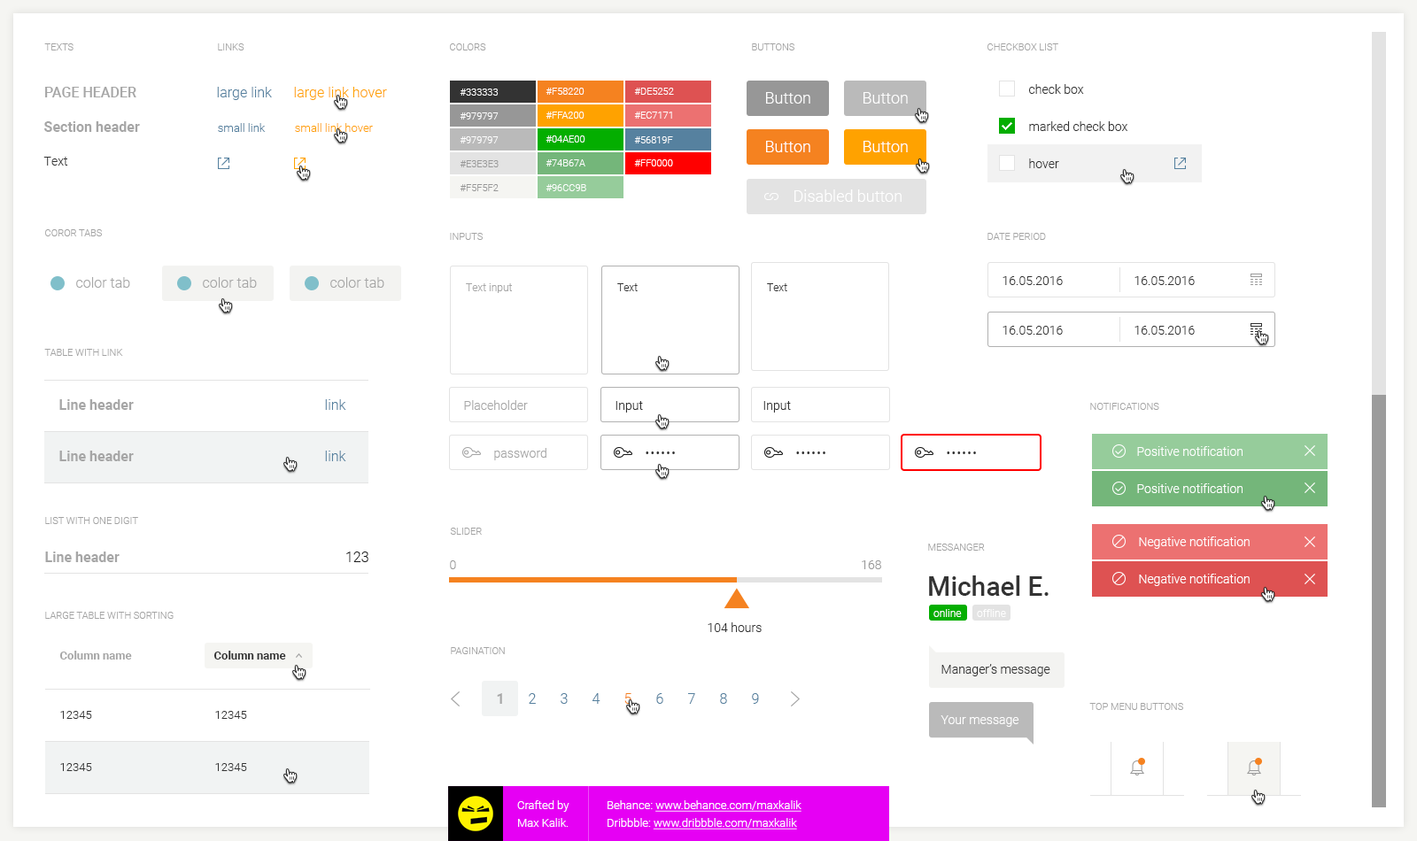
<style>
.page{position:relative;width:1417px;height:841px;background:#ffffff}
.page>*{position:absolute;margin:0}
.t1{font:9.7px "Roboto-Light";color:#a3a3a3;text-transform:uppercase}
.t2{font:14.2px "Roboto-Medium";color:#a6a6a6;text-transform:uppercase}
.t3{font:14.2px "Roboto-Light";color:#56819f}
.t4{font:14.2px "Roboto-Light";color:#ffa200}
.t5{font:9.7px "Roboto-Light";color:#ffffff;text-transform:uppercase}
.t6{font:12.4px/37.2px "Roboto-Light";color:#333333}
.t7{font:15.9px "Roboto-Light";color:#ffffff}
.t8{font:14.2px "Roboto-Bold";color:#a6a6a6}
.t9{font:11.5px "Roboto-Light";color:#56819f}
.t10{font:11.5px "Roboto-Light";color:#ffa200}
.t11{font:12.4px "Roboto-Light";color:#333333}
.t12{font:9.7px "Roboto-Light";color:#979797;text-transform:uppercase}
.t13{font:14.2px "Roboto-Light";color:#a6a6a6}
.t14{font:10.6px "Roboto-Light";color:#a6a6a6}
.t15{font:10.6px "Roboto-Light";color:#333333}
.t16{font:12.4px "Roboto-Light";color:#a6a6a6}
.t17{font:12.4px "Roboto-Light";color:#ffffff}
.t18{font:12.4px "Roboto-Light";letter-spacing:0.1em;color:#333333}
.t19{font:14.2px "Roboto-Light";color:#191919}
.t20{font:12.4px "Roboto-Light";color:#999999}
.t21{font:26.6px "Roboto-Medium";color:#333333}
.t22{font:10.6px "Roboto-Light";color:#ffffff}
.t23{font:11.5px "Roboto-Bold";color:#a6a6a6}
.t24{font:11.5px "Roboto-Bold";color:#333333}
.t25{font:14.2px "Roboto-Light";color:#f58220}
.t26{font:11.5px "Roboto-Light";color:#333333}
.t27{font:11.5px/17.7px "Roboto-Light";color:#ffffff}
.t28{font:11.5px/17.7px "Roboto-Light";color:#ffffff;text-decoration:underline}
</style>
<div class="page">
<p class="t1" style="left:44px;top:43px;width:30px;height:7px">Texts</p>
<p class="t1" style="left:218px;top:43px;width:26px;height:7px">Links</p>
<p class="t1" style="left:450px;top:43px;width:36px;height:7px">Colors</p>
<p class="t1" style="left:752px;top:43px;width:42px;height:7px">Buttons</p>
<p class="t1" style="left:988px;top:43px;width:70px;height:7px">checkbox list</p>
<p class="t2" style="left:45px;top:87px;width:91px;height:10px">Page Header</p>
<p class="t3" style="left:217px;top:87px;width:55px;height:13px">large link</p>
<p class="t4" style="left:294px;top:87px;width:93px;height:13px">large link hover</p>
<p class="t5" style="left:460px;top:89px;width:39px;height:7px">#333333</p>
<p class="t5" style="left:546px;top:88px;width:39px;height:7px">#f58220</p>
<p class="t5" style="left:634px;top:88px;width:40px;height:7px">#de5252</p>
<p class="t6" style="left:1029px;top:84px;width:99px;height:84px">check box<br>marked check box<br>hover</p>
<p class="t7" style="left:766px;top:92px;width:44px;height:12px">Button</p>
<p class="t7" style="left:864px;top:92px;width:44px;height:12px">Button</p>
<p class="t5" style="left:460px;top:112px;width:39px;height:8px">#979797</p>
<p class="t5" style="left:546px;top:112px;width:39px;height:7px">#ffa200</p>
<p class="t5" style="left:634px;top:112px;width:38px;height:7px">#ec7171</p>
<p class="t8" style="left:44px;top:121px;width:96px;height:11px">Section header</p>
<p class="t9" style="left:218px;top:123px;width:48px;height:9px">small link</p>
<p class="t10" style="left:295px;top:123px;width:78px;height:9px">small link hover</p>
<p class="t5" style="left:460px;top:136px;width:39px;height:7px">#979797</p>
<p class="t5" style="left:546px;top:136px;width:39px;height:7px">#04ae00</p>
<p class="t5" style="left:634px;top:136px;width:39px;height:7px">#56819f</p>
<p class="t7" style="left:766px;top:141px;width:44px;height:11px">Button</p>
<p class="t7" style="left:864px;top:141px;width:44px;height:11px">Button</p>
<p class="t11" style="left:43px;top:157px;width:25px;height:9px">Text</p>
<p class="t12" style="left:460px;top:160px;width:39px;height:7px">#e3e3e3</p>
<p class="t5" style="left:546px;top:159px;width:39px;height:8px">#74b67a</p>
<p class="t5" style="left:634px;top:159px;width:39px;height:8px">#ff0000</p>
<p class="t12" style="left:460px;top:184px;width:39px;height:7px">#f5f5f2</p>
<p class="t5" style="left:546px;top:184px;width:40px;height:7px">#96cc9b</p>
<p class="t7" style="left:794px;top:190px;width:108px;height:12px">Disabled button</p>
<p class="t1" style="left:45px;top:229px;width:57px;height:7px">Coror tabs</p>
<p class="t1" style="left:450px;top:233px;width:33px;height:7px">Inputs</p>
<p class="t1" style="left:988px;top:233px;width:58px;height:7px">Date period</p>
<p class="t13" style="left:76px;top:277px;width:54px;height:11px">color tab</p>
<p class="t13" style="left:203px;top:277px;width:54px;height:11px">color tab</p>
<p class="t13" style="left:330px;top:277px;width:54px;height:11px">color tab</p>
<p class="t11" style="left:1003px;top:276px;width:60px;height:9px">16.05.2016</p>
<p class="t11" style="left:1135px;top:276px;width:60px;height:9px">16.05.2016</p>
<p class="t14" style="left:466px;top:283px;width:46px;height:10px">Text input</p>
<p class="t15" style="left:617px;top:283px;width:21px;height:8px">Text</p>
<p class="t15" style="left:767px;top:283px;width:20px;height:8px">Text</p>
<p class="t11" style="left:1003px;top:326px;width:60px;height:9px">16.05.2016</p>
<p class="t11" style="left:1135px;top:326px;width:60px;height:9px">16.05.2016</p>
<p class="t1" style="left:44px;top:349px;width:79px;height:7px">Table with link</p>
<p class="t8" style="left:59px;top:399px;width:75px;height:11px">Line header</p>
<p class="t3" style="left:325px;top:399px;width:21px;height:11px">link</p>
<p class="t16" style="left:464px;top:400px;width:64px;height:10px">Placeholder</p>
<p class="t11" style="left:616px;top:401px;width:27px;height:12px">Input</p>
<p class="t11" style="left:763px;top:401px;width:28px;height:12px">Input</p>
<p class="t1" style="left:1090px;top:403px;width:69px;height:7px">Notifications</p>
<p class="t16" style="left:494px;top:448px;width:52px;height:13px">password</p>
<p class="t17" style="left:1137px;top:446px;width:106px;height:10px">Positive notification</p>
<p class="t8" style="left:59px;top:451px;width:75px;height:10px">Line header</p>
<p class="t3" style="left:325px;top:451px;width:21px;height:10px">link</p>
<p class="t18" style="left:646px;top:452px;width:29px;height:2px">••••••</p>
<p class="t18" style="left:796px;top:452px;width:29px;height:2px">••••••</p>
<p class="t18" style="left:947px;top:452px;width:29px;height:2px">••••••</p>
<p class="t17" style="left:1137px;top:484px;width:106px;height:9px">Positive notification</p>
<p class="t1" style="left:45px;top:517px;width:93px;height:7px">List with one digit</p>
<p class="t1" style="left:450px;top:528px;width:32px;height:7px">slider</p>
<p class="t1" style="left:928px;top:544px;width:57px;height:7px">Messanger</p>
<p class="t17" style="left:1139px;top:537px;width:111px;height:12px">Negative notification</p>
<p class="t8" style="left:45px;top:552px;width:75px;height:10px">Line header</p>
<p class="t19" style="left:346px;top:552px;width:22px;height:10px">123</p>
<p class="t20" style="left:450px;top:561px;width:6px;height:9px">0</p>
<p class="t20" style="left:862px;top:561px;width:19px;height:9px">168</p>
<p class="t21" style="left:929px;top:576px;width:120px;height:20px">Michael E.</p>
<p class="t17" style="left:1139px;top:574px;width:111px;height:12px">Negative notification</p>
<p class="t1" style="left:45px;top:612px;width:129px;height:7px">Large table with sorting</p>
<p class="t22" style="left:934px;top:609px;width:28px;height:8px">online</p>
<p class="t22" style="left:977px;top:609px;width:29px;height:8px">offline</p>
<p class="t11" style="left:708px;top:623px;width:54px;height:9px">104 hours</p>
<p class="t23" style="left:59px;top:651px;width:73px;height:9px">Column name</p>
<p class="t24" style="left:213px;top:651px;width:73px;height:9px">Column name</p>
<p class="t1" style="left:451px;top:647px;width:54px;height:8px">Pagination</p>
<p class="t11" style="left:942px;top:664px;width:108px;height:13px">Manager’s message</p>
<p class="t3" style="left:497px;top:694px;width:262px;height:10px"><span class="t8">1</span> 2 3 4 <span class="t25">5</span> 6 7 8 9</p>
<p class="t26" style="left:60px;top:711px;width:32px;height:8px">12345</p>
<p class="t26" style="left:215px;top:711px;width:32px;height:8px">12345</p>
<p class="t1" style="left:1089px;top:703px;width:94px;height:7px">Top menu buttons</p>
<p class="t17" style="left:941px;top:716px;width:78px;height:11px">Your message</p>
<p class="t26" style="left:60px;top:763px;width:32px;height:8px">12345</p>
<p class="t26" style="left:215px;top:763px;width:32px;height:8px">12345</p>
<p class="t27" style="left:517px;top:801px;width:53px;height:26px">Crafted by<br>Max Kalik.</p>
<p class="t28" style="left:608px;top:801px;width:194px;height:29px"><span class="t27">Behance: </span>www.behance.com/maxkalik<br><span class="t27">Dribbble: </span>www.dribbble.com/maxkalik</p>
</div>
